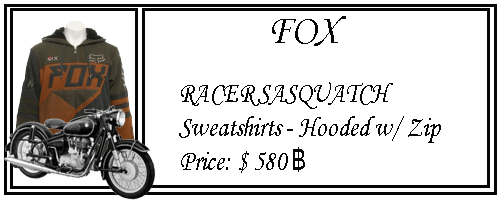
<style>
.page{position:relative;width:500px;height:200px;background:#ffffff}
.page>*{position:absolute;margin:0}
.t1{font:40.9px "MonotypeCorsiva";color:#070707}
.t2{font:28.6px "MonotypeCorsiva";color:#070707;scale:0.87 1}
.t3{font:28.6px "Tahoma";color:#070707;scale:0.87 1}
</style>
<div class="page">
<p class="t1" style="left:272px;top:16px;width:74px;height:30px">FOX</p>
<p class="t2" style="left:179px;top:82px;width:262px;height:91px">RACER SASQUATCH<br>Sweatshirts - Hooded w/ Zip<br>Price: $ 580 <span class="t3">฿</span></p>
</div>
